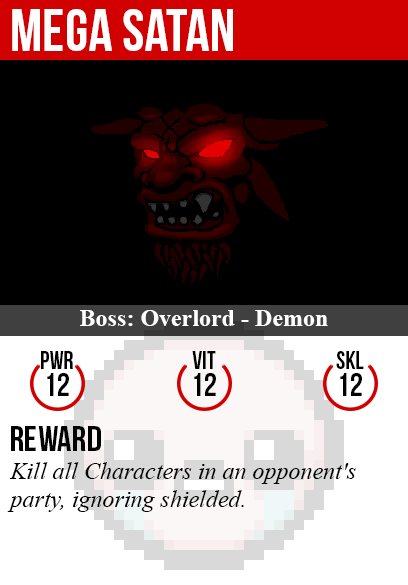
<style>
.page{position:relative;width:408px;height:585px;background:#000000}
.page>*{position:absolute;margin:0}
.t1{font:60px "BebasNeue";color:#ffffff}
.t2{font:24px "TimesNewRomanPS-BoldMT";color:#ffffff}
.t3{font:25px "BebasNeue";color:#000000}
.t4{font:32px "BebasNeue";color:#000000}
.t5{font:36px "BebasNeue";color:#000000}
.t6{font:24px "TimesNewRomanPS-ItalicMT";color:#000000}
</style>
<div class="page">
<p class="t1" style="left:12px;top:9px;width:221px;height:42px">mega satan</p>
<p class="t2" style="left:80px;top:310px;width:248px;height:16px">Boss: Overlord - Demon</p>
<p class="t3" style="left:41px;top:351px;width:32px;height:18px">PWR</p>
<p class="t3" style="left:192px;top:351px;width:24px;height:18px">vit</p>
<p class="t3" style="left:336px;top:351px;width:28px;height:18px">skl</p>
<p class="t4" style="left:47px;top:373px;width:22px;height:23px">12</p>
<p class="t4" style="left:194px;top:373px;width:22px;height:23px">12</p>
<p class="t4" style="left:340px;top:373px;width:22px;height:23px">12</p>
<p class="t5" style="left:11px;top:426px;width:90px;height:25px">reward</p>
<p class="t6" style="left:7px;top:462px;width:349px;height:50px">Kill all Characters in an opponent's<br>party, ignoring shielded.</p>
</div>
